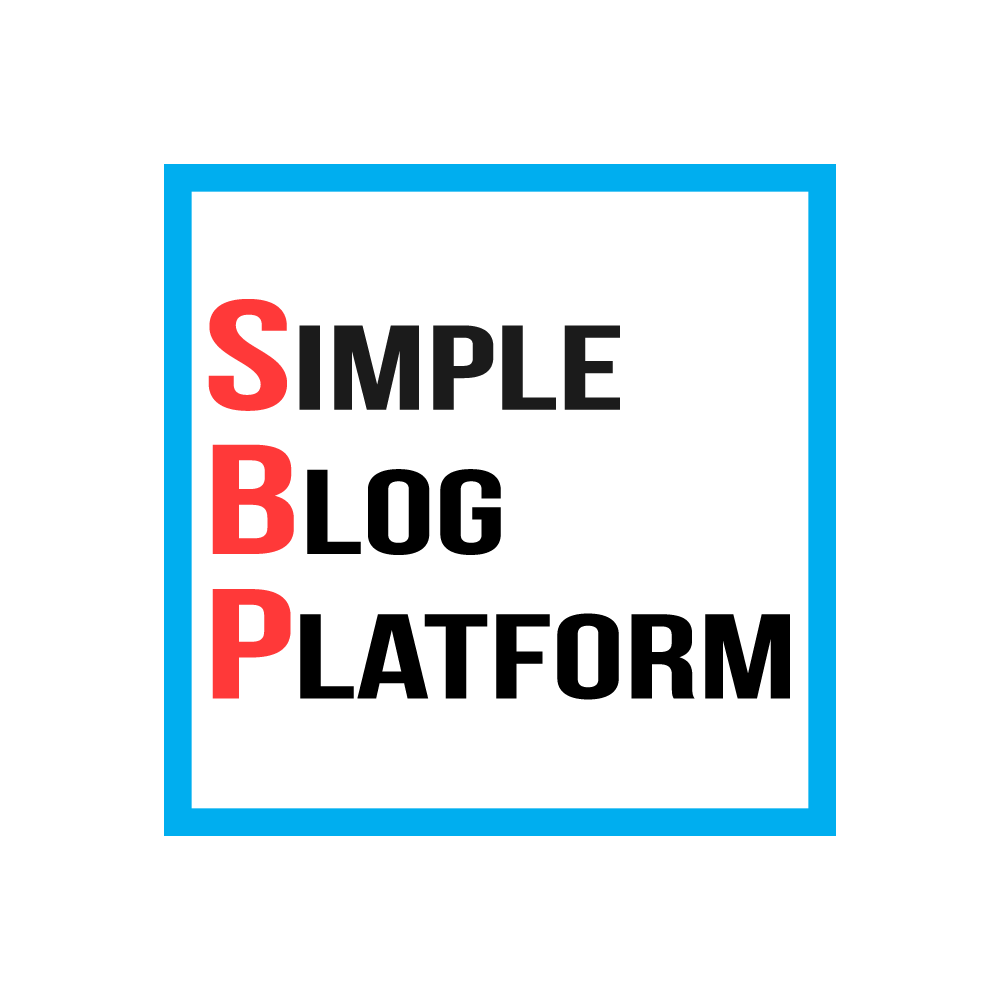
<style>
.page{position:relative;width:1000px;height:1000px;background:#ffffff}
.page>*{position:absolute;margin:0}
.t1{font:119.9px/144.4px "BebasNeue";color:#000000;scale:1.53 1}
.t2{font:37.5px/144.4px "BebasNeue";color:#ff3939;scale:1.53 1}
.t3{font:119.9px/144.4px "BebasNeue";color:#1b1b1b;scale:1.53 1}
</style>
<div class="page">
<p class="t1" style="left:208px;top:299px;width:582px;height:401px"><span class="t2">S</span><span class="t3">imple<br></span><span class="t2">B</span>log<br><span class="t2">P</span>latform</p>
</div>
